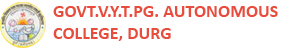
<style>
.page{position:relative;width:290px;height:50px;background:#ffffff}
.page>*{position:absolute;margin:0}
.t1{font:18px "Calibri-Bold";color:#e84c3d;text-transform:uppercase}
</style>
<div class="page">
<p class="t1" style="left:53px;top:6px;width:225px;height:35px">Govt.V.Y.T.PG. Autonomous<br>College, Durg</p>
</div>
